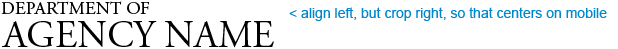
<style>
.page{position:relative;width:618px;height:49px;background:#ffffff}
.page>*{position:absolute;margin:0}
.t1{font:18px "AGaramondPro-Regular";color:#000000}
.t2{font:14px "ArialMT";color:#0088cc}
.t3{font:38px "AGaramondPro-Regular";color:#000000}
</style>
<div class="page">
<p class="t1" style="left:1px;top:1px;width:148px;height:13px">DEPARTMENT OF</p>
<p class="t2" style="left:289px;top:7px;width:318px;height:14px">&lt; align left, but crop right, so that centers on mobile</p>
<p class="t3" style="left:2px;top:21px;width:272px;height:27px">AGENCY NAME</p>
</div>
